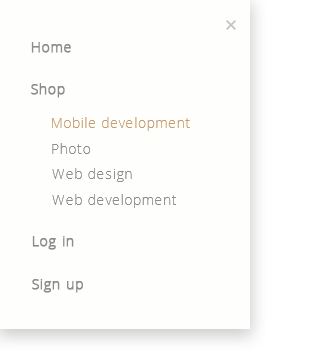
<style>
.page{position:relative;width:320px;height:364px;background:#fefefd}
.page>*{position:absolute;margin:0}
.t1{font:14px "OpenSans-Light";letter-spacing:0.05em;color:#8c8c8c;font-weight:bold}
.t2{font:14px "OpenSans-Light";letter-spacing:0.05em;color:#c69c6d}
.t3{font:14px "OpenSans-Light";letter-spacing:0.05em;color:#8c8c8c}
</style>
<div class="page">
<p class="t1" style="left:31px;top:42px;width:40px;height:11px">Home</p>
<p class="t1" style="left:31px;top:83px;width:34px;height:15px">Shop</p>
<p class="t2" style="left:52px;top:117px;width:138px;height:14px">Mobile development</p>
<p class="t3" style="left:52px;top:143px;width:38px;height:11px">Photo</p>
<p class="t3" style="left:52px;top:168px;width:80px;height:14px">Web design</p>
<p class="t3" style="left:52px;top:194px;width:124px;height:14px">Web development</p>
<p class="t1" style="left:32px;top:236px;width:42px;height:14px">Log in</p>
<p class="t1" style="left:32px;top:279px;width:51px;height:14px">Sign up</p>
</div>
